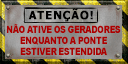
<style>
.page{position:relative;width:128px;height:64px}
.page>*{position:absolute;margin:0}
.t1{font:11px "Tahoma-Bold";letter-spacing:0.08em;color:#000000;font-weight:bold}
.t2{font:10px/11px "Arial-Black";letter-spacing:-0.1em;color:#ac0000;text-transform:uppercase;scale:0.83 1}
</style>
<div class="page">
<p class="t1" style="left:28px;top:8px;width:65px;height:14px">ATENÇÃO!</p>
<p class="t2" style="left:7px;top:24px;width:114px;height:31px;text-align:center">Não ative os geradores<br>enquanto a ponte<br>estiver estendida</p>
</div>
